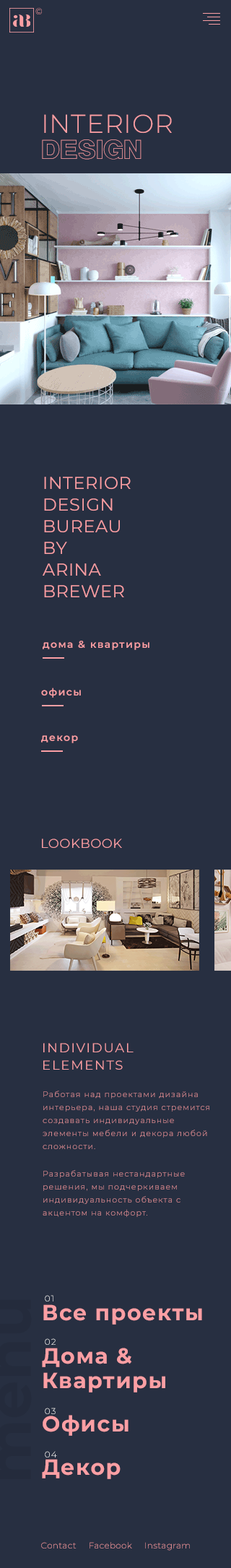
<style>
.page{position:relative;width:231px;height:1568px;background:#272f41}
.page>*{position:absolute;margin:0}
.t1{font:8.7px "Montserrat-Light";letter-spacing:0.025em}
.t2{font:26px/26px "Montserrat-Light";letter-spacing:0.025em;color:#fb9fa4;text-transform:uppercase}
.t3{font:26px/26px "Cyrveticav2ExtraOutline-Normal";color:#fb9fa4;text-transform:uppercase}
.t4{font:17.3px/21.7px "Montserrat-Regular";letter-spacing:0.025em;color:#fb9fa4;text-transform:uppercase}
.t5{font:10.1px "Montserrat-SemiBold";letter-spacing:0.1em;color:#fb9fa4}
.t6{font:13px "Montserrat-Regular";letter-spacing:0.025em;color:#fb9fa4;text-transform:uppercase}
.t7{font:13px/17.3px "Montserrat-Regular";letter-spacing:0.1em;color:#fb9fa4}
.t8{font:7.9px/13px "Montserrat-Light";letter-spacing:0.1em}
.t9{font:8.7px/43.3px "Montserrat-Light";letter-spacing:0.1em;color:#fefefe;text-transform:uppercase}
.t10{font:8.7px/26px "Montserrat-Light";letter-spacing:0.1em;color:#fefefe;text-transform:uppercase}
.t11{font:21.7px/61.4px "Montserrat-Bold";letter-spacing:0.05em;color:#fb9fa4}
.t12{font:21.7px/43.3px "Montserrat-Bold";letter-spacing:0.05em;color:#fb9fa4}
.t13{font:21.7px/24.6px "Montserrat-Bold";letter-spacing:0.05em;color:#fb9fa4}
</style>
<div class="page">
<p class="t1" style="left:35px;top:8px;width:7px;height:6px">©</p>
<p class="t2" style="left:42px;top:114px;width:130px;height:46px">interior <br><span class="t3">design</span></p>
<p class="t4" style="left:43px;top:477px;width:88px;height:120px">interior <br>design <br>bureau<br>by <br>Arina <br>Brewer</p>
<p class="t5" style="left:43px;top:641px;width:107px;height:9px">дома &amp; квартиры</p>
<p class="t5" style="left:41px;top:688px;width:40px;height:10px">офисы</p>
<p class="t5" style="left:41px;top:735px;width:37px;height:8px">декор</p>
<p class="t6" style="left:42px;top:839px;width:80px;height:9px">lookbook</p>
<p class="t7" style="left:43px;top:1043px;width:91px;height:27px">INDIVIDUAL <br>ELEMENTS</p>
<p class="t8" style="left:43px;top:1091px;width:166px;height:58px">Работая над проектами дизайна интерьера, наша студия стремится создавать индивидуальные элементы мебели и декора любой <br>сложности.</p>
<p class="t8" style="left:43px;top:1170px;width:142px;height:47px">Разрабатывая нестандартные решения, мы подчеркиваем индивидуальность объекта с акцентом на комфорт.</p>
<p class="t9" style="left:45px;top:1295px;width:12px;height:162px">01<br>02<br><br><span class="t10">03<br></span>04</p>
<p class="t11" style="left:42px;top:1304px;width:160px;height:175px">Все проекты<br><span class="t12">Дома &amp; <br></span><span class="t13">Квартиры<br></span><span class="t12">Офисы<br>Декор</span></p>
<p class="t1" style="left:41px;top:1542px;width:149px;height:9px">Contact     Facebook     Instagram</p>
</div>
